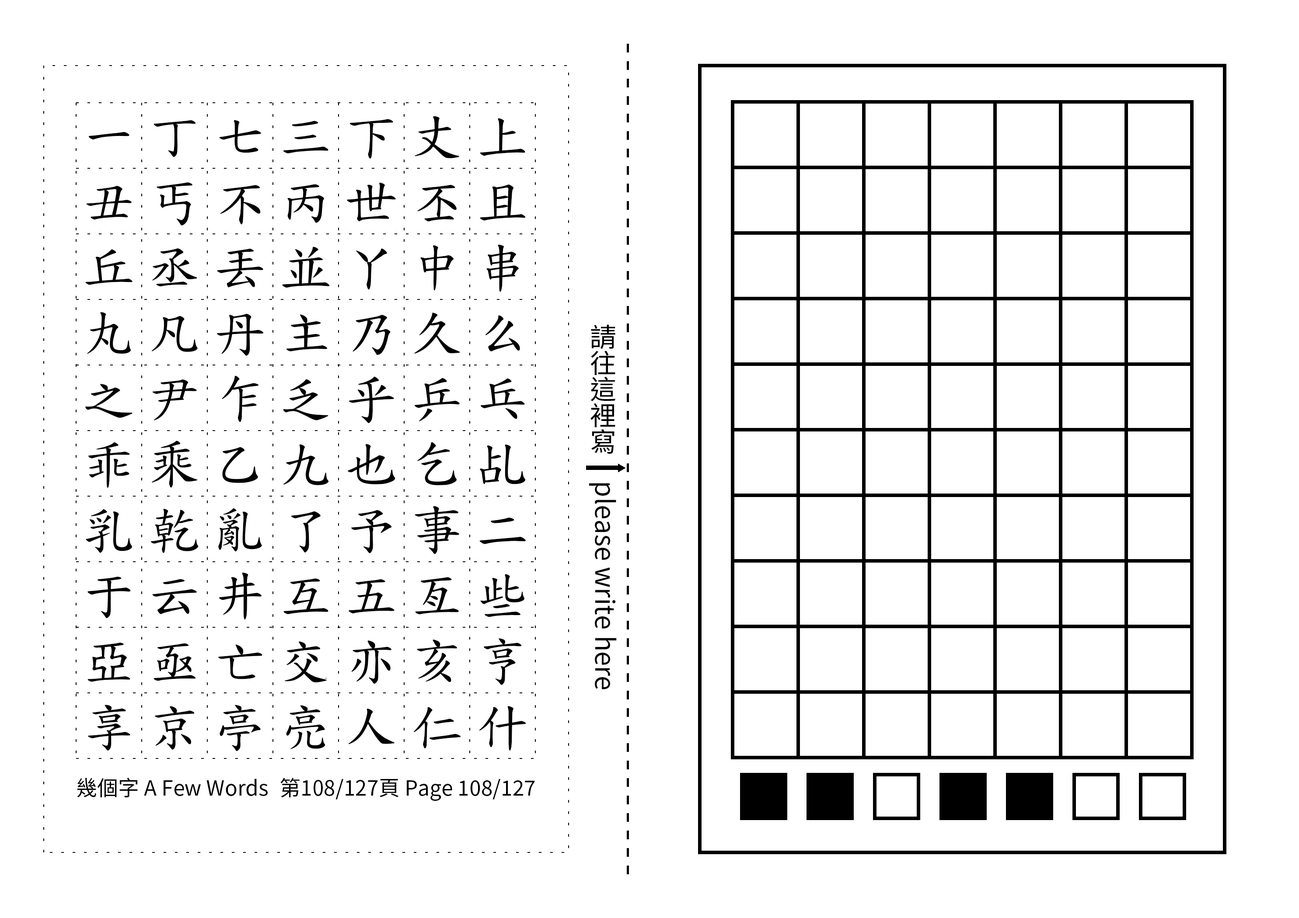
<style>
.page{position:relative;width:1299px;height:918px;background:#ffffff}
.page>*{position:absolute;margin:0}
.t1{font:52.5px/65.6px "TW-Kai-98_1";letter-spacing:0.25em;color:#000000}
.t2{font:26.2px "SourceHanSansTC-Regular";color:#000000}
.t3{font:21px "SourceHanSansTC-Regular";color:#000000}
</style>
<div class="page">
<p class="t1" style="left:85px;top:116px;width:441px;height:636px;text-align:center">一丁七三下丈上丑丐不丙世丕且丘丞丟並丫中串丸凡丹主乃久么之尹乍乏乎乒乓乖乘乙九也乞乩乳乾亂了予事二于云井互五亙些亞亟亡交亦亥亨享京亭亮人仁什</p>
<p class="t2" style="left:589px;top:324px;width:28px;height:366px;text-align:center">請往這裡寫　please write here</p>
<p class="t3" style="left:77px;top:778px;width:191px;height:20px">幾個字 A Few Words</p>
<p class="t3" style="left:280px;top:778px;width:255px;height:23px">第108/127頁 Page 108/127</p>
</div>
